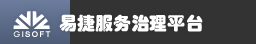
<style>
.page{position:relative;width:256px;height:44px;background:#333333}
.page>*{position:absolute;margin:0}
.t1{font:18px "STHupo";color:#ffffff;text-transform:uppercase}
.t2{font:7.8px "ArialMT";letter-spacing:0.16em;color:#ffffff;font-weight:bold}
.t3{font:7.8px "CenturyGothic";letter-spacing:0.16em;color:#ffffff;font-weight:bold}
</style>
<div class="page">
<p class="t1" style="left:59px;top:14px;width:144px;height:18px">易捷服务治理平台</p>
<p class="t2" style="left:13px;top:31px;width:38px;height:6px"><span class="t3">G</span>ISOFT</p>
</div>
